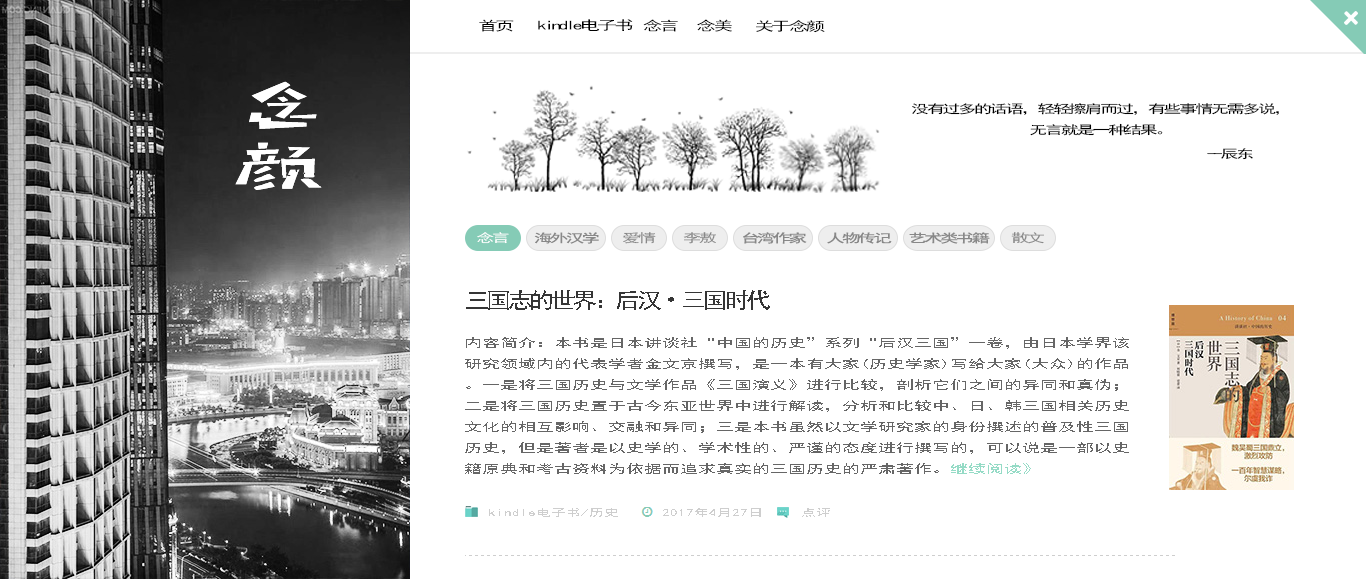
<style>
.page{position:relative;width:1366px;height:579px;background:#ffffff}
.page>*{position:absolute;margin:0}
.t1{font:13px "SimHei";letter-spacing:-0.16em;color:#000000;scale:1.53 1}
.t2{font:13px "SimHei";letter-spacing:-0.14em;color:#000000;scale:1.53 1}
.t3{font:12px "SimHei";letter-spacing:-0.14em;color:#000000;scale:1.53 1}
.t4{font:12px "SimHei";letter-spacing:-0.14em;color:#ffffff;scale:1.53 1}
.t5{font:12px "SimHei";letter-spacing:-0.14em;color:#888888;scale:1.53 1}
.t6{font:22px "SimHei";letter-spacing:-0.14em;color:#353535;scale:1.15 1}
.t7{font:22px "AdobeHeitiStd-Regular";letter-spacing:-0.14em;color:#353535;scale:1.15 1}
.t8{font:12px "SimHei";color:#666666;scale:1.53 1}
.t9{font:12px "SimHei";color:#95dbc6;scale:1.53 1}
.t10{font:10px "SimHei";color:#cecece;scale:1.53 1}
</style>
<div class="page">
<p class="t1" style="left:479px;top:19px;width:35px;height:13px">首页</p>
<p class="t2" style="left:538px;top:19px;width:95px;height:12px">kindle电子书</p>
<p class="t2" style="left:643px;top:19px;width:35px;height:13px">念言</p>
<p class="t2" style="left:697px;top:19px;width:35px;height:13px">念美</p>
<p class="t2" style="left:756px;top:20px;width:69px;height:13px">关于念颜</p>
<p class="t3" style="left:912px;top:103px;width:367px;height:33px;text-align:center">没有过多的话语，轻轻擦肩而过，有些事情无需多说，<br>无言就是一种结果。</p>
<p class="t3" style="left:1207px;top:148px;width:46px;height:12px">--辰东</p>
<p class="t4" style="left:477px;top:232px;width:32px;height:12px">念言</p>
<p class="t5" style="left:534px;top:232px;width:65px;height:12px">海外汉学</p>
<p class="t5" style="left:623px;top:232px;width:33px;height:12px">爱情</p>
<p class="t5" style="left:683px;top:232px;width:33px;height:12px">李敖</p>
<p class="t5" style="left:743px;top:232px;width:64px;height:12px">台湾作家</p>
<p class="t5" style="left:827px;top:232px;width:65px;height:12px">人物传记</p>
<p class="t5" style="left:909px;top:232px;width:81px;height:12px">艺术类书籍</p>
<p class="t5" style="left:1011px;top:232px;width:33px;height:12px">散文</p>
<p class="t6" style="left:466px;top:290px;width:304px;height:20px">三国志的世界：后汉<span class="t7">•三国时代</span></p>
<p class="t8" style="left:465px;top:337px;width:664px;height:137px">内容简介：本书是日本讲谈社“中国的历史”系列“后汉三国”一卷，由日本学界该研究领域内的代表学者金文京撰写，是一本有大家(历史学家)写给大家(大众)的作品。一是将三国历史与文学作品《三国演义》进行比较，剖析它们之间的异同和真伪；二是将三国历史置于古今东亚世界中进行解读，分析和比较中、日、韩三国相关历史文化的相互影响、交融和异同；三是本书虽然以文学研究家的身份撰述的普及性三国历史，但是著者是以史学的、学术性的、严谨的态度进行撰写的，可以说是一部以史籍原典和考古资料为依据而追求真实的三国历史的严肃著作。<span class="t9">继续阅读》</span></p>
<p class="t10" style="left:489px;top:508px;width:129px;height:9px">kindle电子书/历史</p>
<p class="t10" style="left:663px;top:508px;width:98px;height:9px">2017年4月27日</p>
<p class="t10" style="left:802px;top:508px;width:28px;height:9px">点评</p>
</div>
